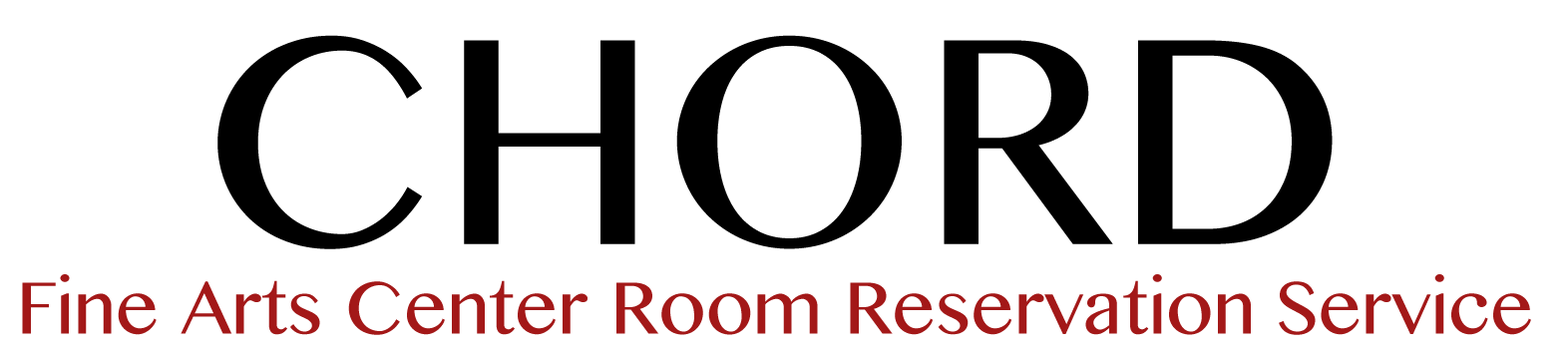
<style>
.page{position:relative;width:1568px;height:352px;background:#ffffff}
.page>*{position:absolute;margin:0}
.t1{font:74.8px "OriyaMN";color:#a31818}
.t2{font:299.2px "OriyaMN";color:#000000}
</style>
<div class="page">
<p class="t1" style="left:22px;top:35px;width:1509px;height:300px;text-align:center"><span class="t2">CHORD<br></span>Fine Arts Center Room Reservation Service</p>
</div>
